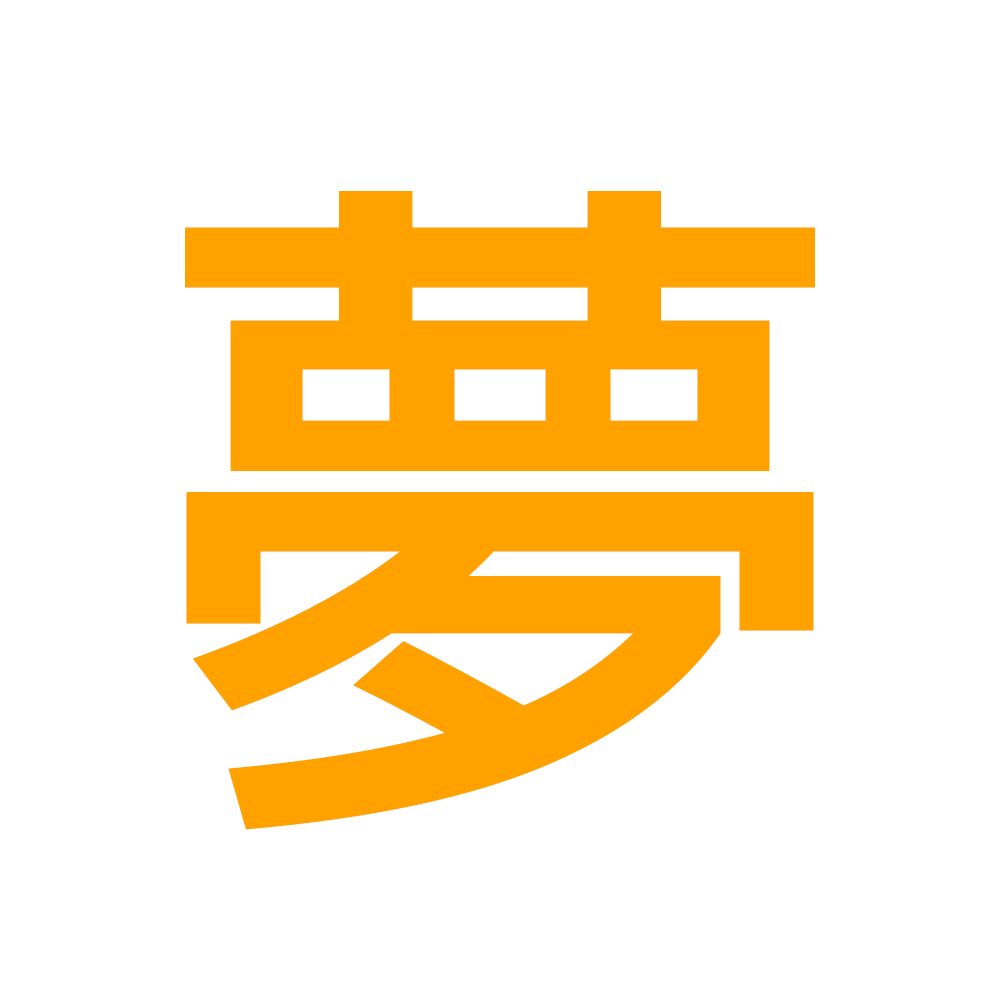
<style>
.page{position:relative;width:1000px;height:1000px;background:#ffffff}
.page>*{position:absolute;margin:0}
.t1{font:700px "Mplus1p-Medium";color:#ffa200}
</style>
<div class="page">
<p class="t1" style="left:185px;top:191px;width:630px;height:639px">夢</p>
</div>
